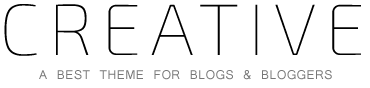
<style>
.page{position:relative;width:370px;height:88px;background:#ffffff}
.page>*{position:absolute;margin:0}
.t1{font:72.7px "Exo2-Thin";letter-spacing:0.12em;color:#000000}
.t2{font:11.7px "Kartika";letter-spacing:0.04em;color:#777777}
</style>
<div class="page">
<p class="t1" style="left:4px;top:4px;width:357px;height:52px">CREATIVE</p>
<p class="t2" style="left:39px;top:70px;width:293px;height:10px">A BEST THEME FOR BLOGS &amp; BLOGGERS</p>
</div>
